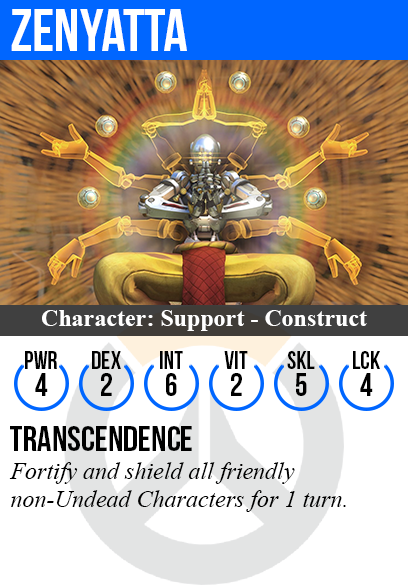
<style>
.page{position:relative;width:408px;height:585px;background:#ffffff}
.page>*{position:absolute;margin:0}
.t1{font:60px "BebasNeue";color:#ffffff}
.t2{font:24px "TimesNewRomanPS-BoldMT";color:#ffffff}
.t3{font:25px "BebasNeue";color:#000000}
.t4{font:32px "BebasNeue";color:#000000}
.t5{font:36px "BebasNeue";color:#000000}
.t6{font:24px "TimesNewRomanPS-ItalicMT";color:#000000}
</style>
<div class="page">
<p class="t1" style="left:11px;top:9px;width:176px;height:42px">zenyatta</p>
<p class="t2" style="left:42px;top:310px;width:325px;height:21px">Character: Support - Construct</p>
<p class="t3" style="left:25px;top:351px;width:32px;height:18px">PWR</p>
<p class="t3" style="left:92px;top:351px;width:29px;height:18px">dex</p>
<p class="t3" style="left:160px;top:351px;width:23px;height:18px">int</p>
<p class="t3" style="left:224px;top:351px;width:24px;height:18px">vit</p>
<p class="t3" style="left:287px;top:351px;width:28px;height:18px">skl</p>
<p class="t3" style="left:353px;top:351px;width:27px;height:18px">lck</p>
<p class="t4" style="left:35px;top:373px;width:13px;height:23px">4</p>
<p class="t4" style="left:101px;top:373px;width:11px;height:23px">2</p>
<p class="t4" style="left:166px;top:373px;width:11px;height:23px">6</p>
<p class="t4" style="left:231px;top:373px;width:11px;height:23px">2</p>
<p class="t4" style="left:296px;top:373px;width:11px;height:23px">5</p>
<p class="t4" style="left:360px;top:373px;width:13px;height:23px">4</p>
<p class="t5" style="left:10px;top:426px;width:182px;height:25px">transcendence</p>
<p class="t6" style="left:9px;top:462px;width:337px;height:50px">Fortify and shield all friendly<br>non-Undead Characters for 1 turn.</p>
</div>
